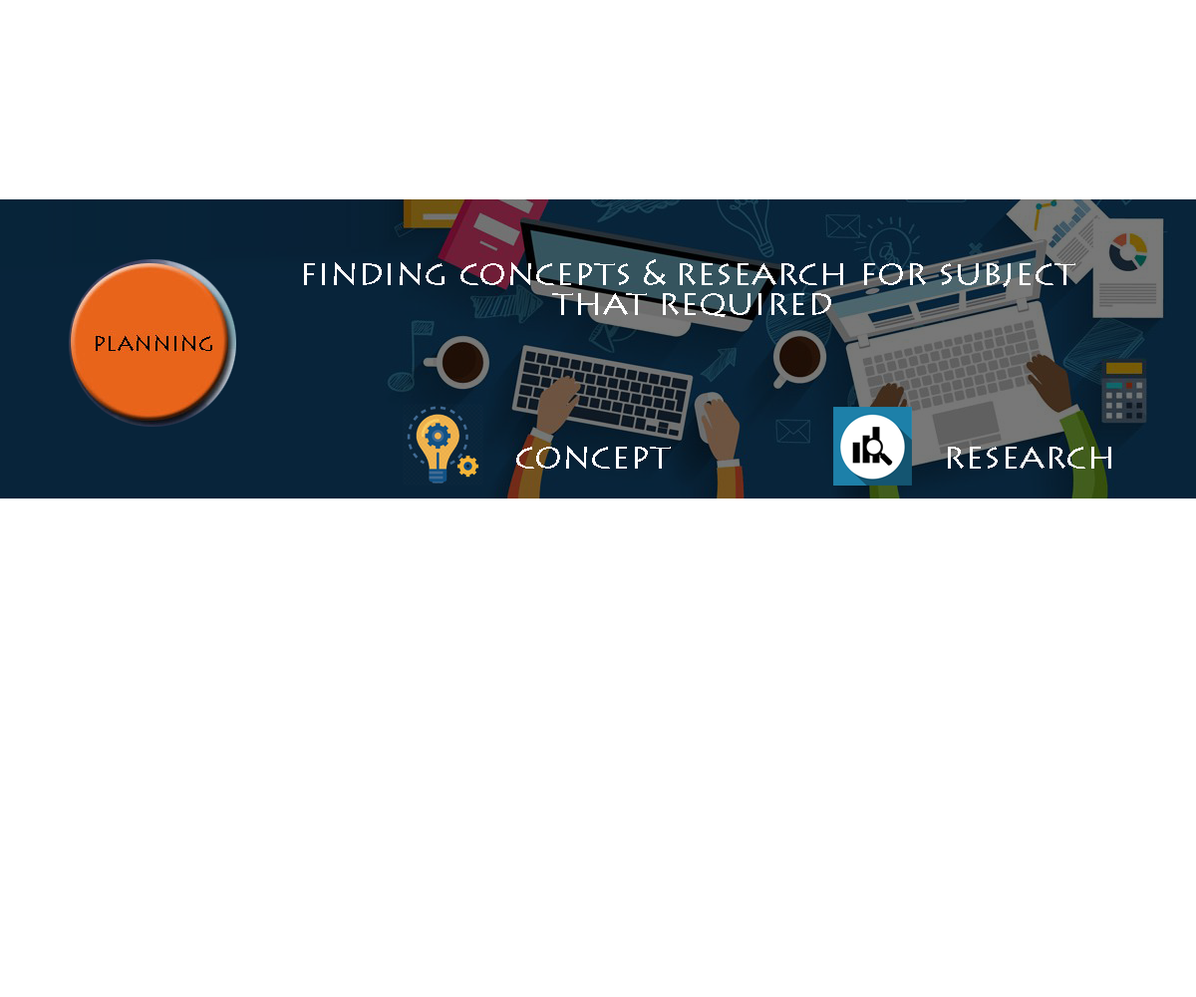
<style>
.page{position:relative;width:1196px;height:997px;background:#ffffff}
.page>*{position:absolute;margin:0}
.t1{font:35.9px/29.9px "LithosPro-Regular";color:#ffffff}
.t2{font:35.9px "LithosPro-Regular";color:#ffffff}
</style>
<div class="page">
<p class="t1" style="left:304px;top:259px;width:772px;height:58px;text-align:center">finding concepts &amp; research for subject <br>that required</p>
<p class="t2" style="left:516px;top:446px;width:155px;height:23px">concept</p>
<p class="t2" style="left:948px;top:447px;width:163px;height:22px">research</p>
</div>
